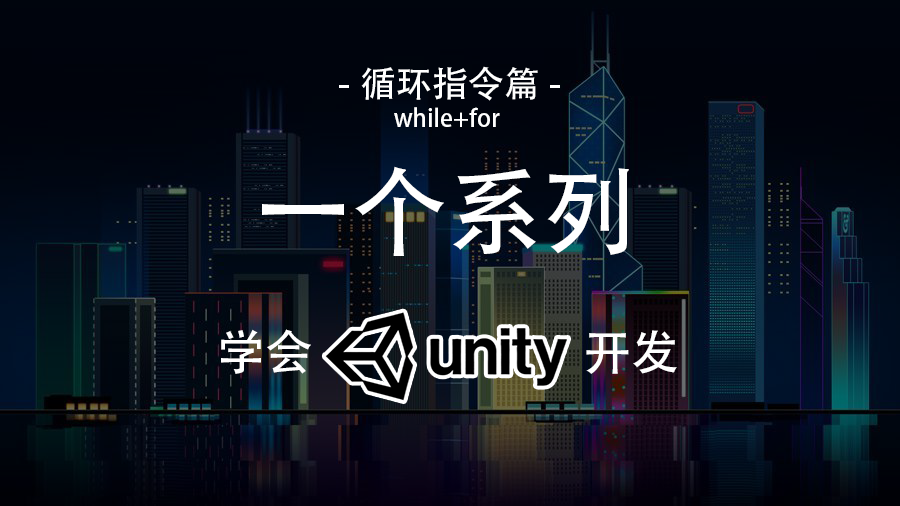
<style>
.page{position:relative;width:900px;height:506px}
.page>*{position:absolute;margin:0}
.t1{font:36px "AdobeHeitiStd-Regular";color:#ffffff}
.t2{font:24px "AdobeHeitiStd-Regular";color:#ffffff}
.t3{font:96px "AdobeHeitiStd-Regular";color:#ffffff}
.t4{font:48px "AdobeHeitiStd-Regular";color:#ffffff}
</style>
<div class="page">
<p class="t1" style="left:339px;top:66px;width:221px;height:35px">-循环指令篇-</p>
<p class="t2" style="left:394px;top:107px;width:106px;height:20px">while+for</p>
<p class="t3" style="left:262px;top:166px;width:367px;height:90px">一个系列</p>
<p class="t4" style="left:221px;top:329px;width:90px;height:45px">学会</p>
<p class="t4" style="left:586px;top:330px;width:91px;height:44px">开发</p>
</div>
